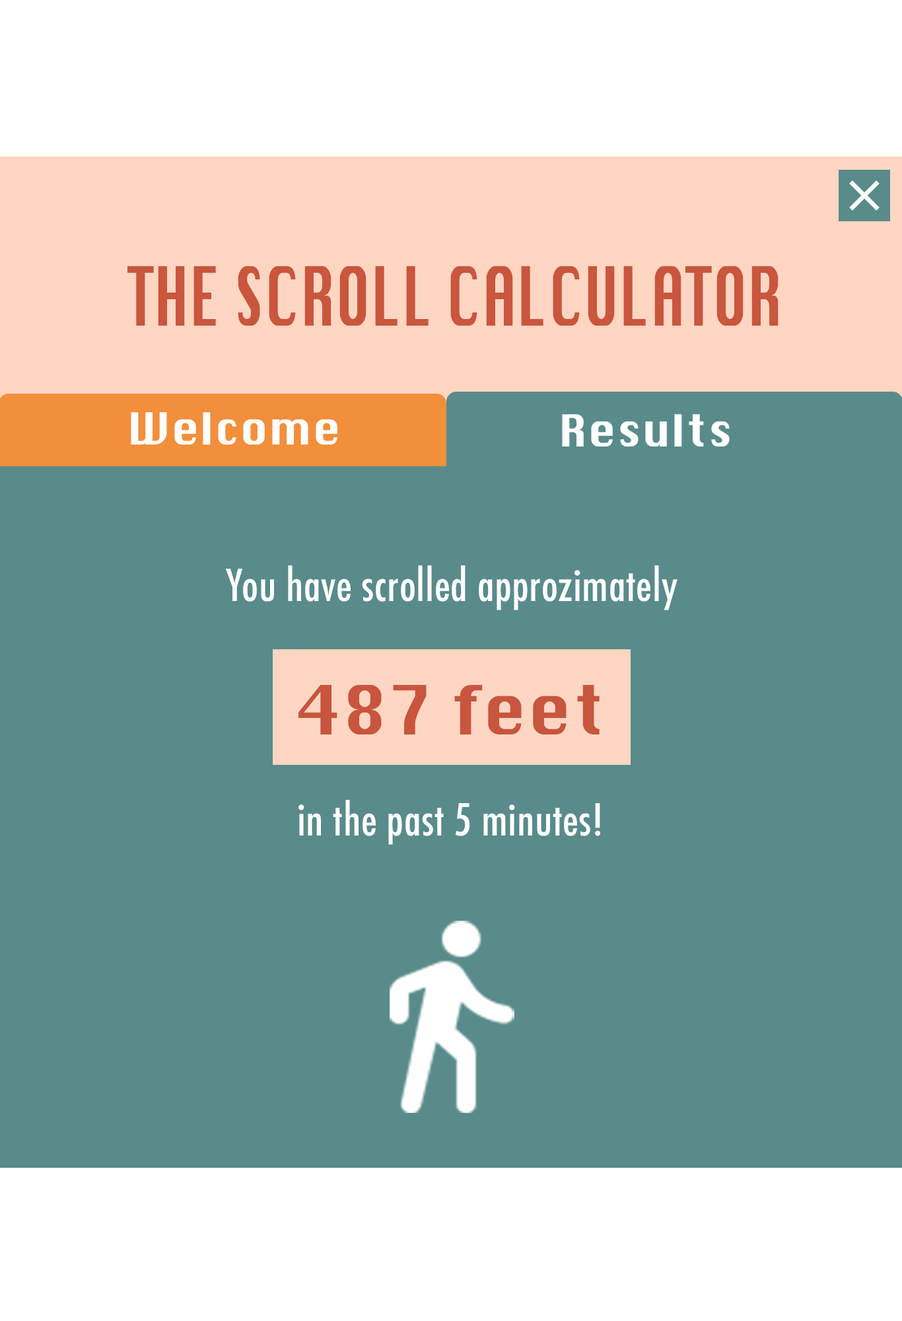
<style>
.page{position:relative;width:902px;height:1321px;background:#598b8b}
.page>*{position:absolute;margin:0}
.t1{font:79.3px "Krungthep";letter-spacing:0.01em;color:#c9563d;scale:0.66 1}
.t2{font:42.9px "Krungthep";letter-spacing:0.01em;color:#ffffff}
.t3{font:42.9px "Futura-CondensedMedium";letter-spacing:0.01em;color:#ffffff}
.t4{font:66.1px "Krungthep";letter-spacing:0.01em;color:#c8553d}
</style>
<div class="page">
<p class="t1" style="left:128px;top:266px;width:651px;height:60px">THE SCROLL CALCULATOR</p>
<p class="t2" style="left:131px;top:412px;width:207px;height:33px">Welcome</p>
<p class="t2" style="left:562px;top:414px;width:168px;height:33px">Results</p>
<p class="t3" style="left:226px;top:566px;width:452px;height:44px">You have scrolled approzimately</p>
<p class="t4" style="left:299px;top:685px;width:301px;height:50px">487 feet</p>
<p class="t3" style="left:299px;top:800px;width:302px;height:45px">in the past 5 minutes!</p>
</div>
